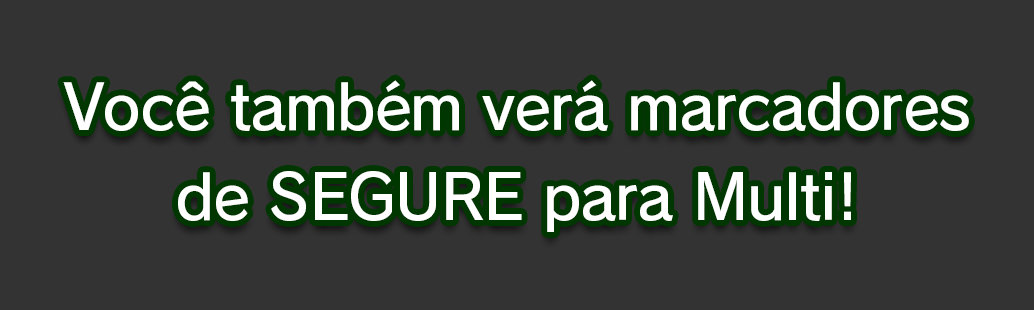
<style>
.page{position:relative;width:1034px;height:310px;background:#333333}
.page>*{position:absolute;margin:0}
.t1{font:61.3px/90.7px "RodinPro-DB";letter-spacing:-0.022em;color:#ffffff}
</style>
<div class="page">
<p class="t1" style="left:63px;top:80px;width:906px;height:152px;text-align:center">Você também verá marcadores<br>de SEGURE para Multi!</p>
</div>
